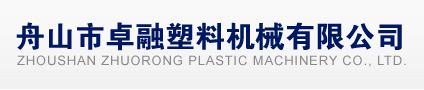
<style>
.page{position:relative;width:424px;height:90px}
.page>*{position:absolute;margin:0}
.t1{font:30px "FZDHTJW--GB1-0";color:#001761;text-transform:uppercase}
.t2{font:13px "ArialMT";letter-spacing:0.065em;color:#898989;text-transform:uppercase}
</style>
<div class="page">
<p class="t1" style="left:16px;top:22px;width:386px;height:29px">舟山市卓融塑料机械有限公司</p>
<p class="t2" style="left:17px;top:55px;width:389px;height:12px">zhoushan zhuorong Plastic Machinery Co., Ltd.</p>
</div>
